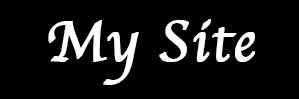
<style>
.page{position:relative;width:299px;height:99px;background:#000000}
.page>*{position:absolute;margin:0}
.t1{font:59px "Apple-Chancery";letter-spacing:0.005em;color:#ffffff;font-weight:bold}
</style>
<div class="page">
<p class="t1" style="left:48px;top:19px;width:207px;height:66px">My Site</p>
</div>
